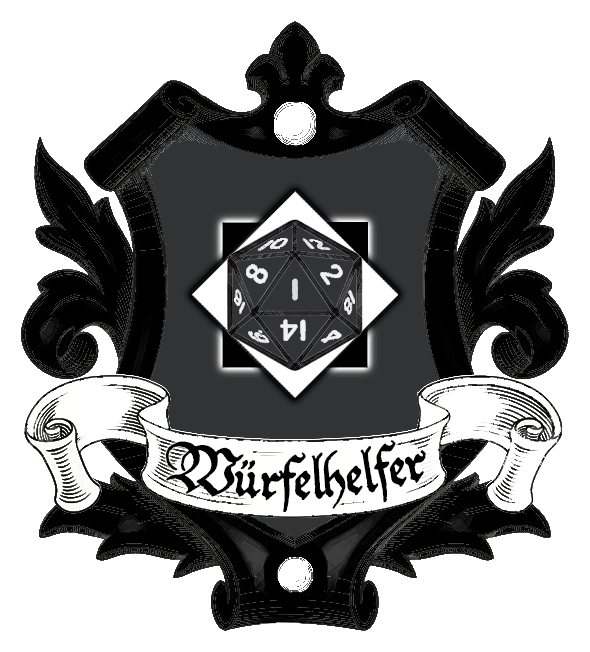
<style>
.page{position:relative;width:590px;height:652px;background:#ffffff}
.page>*{position:absolute;margin:0}
.t1{font:65.7px "Friedolin";color:#000000}
</style>
<div class="page">
<p class="t1" style="left:165px;top:440px;width:261px;height:72px;rotate:-1deg">Würfelhelfer</p>
</div>
